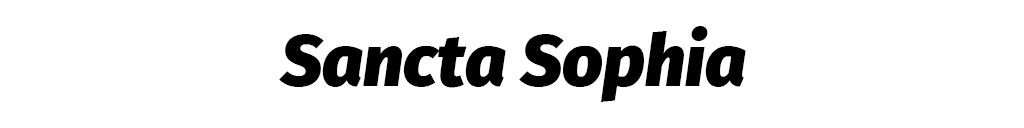
<style>
.page{position:relative;width:1024px;height:128px;background:#ffffff}
.page>*{position:absolute;margin:0}
.t1{font:71.8px "FiraSans-BlackItalic";color:#000000}
</style>
<div class="page">
<p class="t1" style="left:279px;top:26px;width:467px;height:76px">Sancta Sophia</p>
</div>
